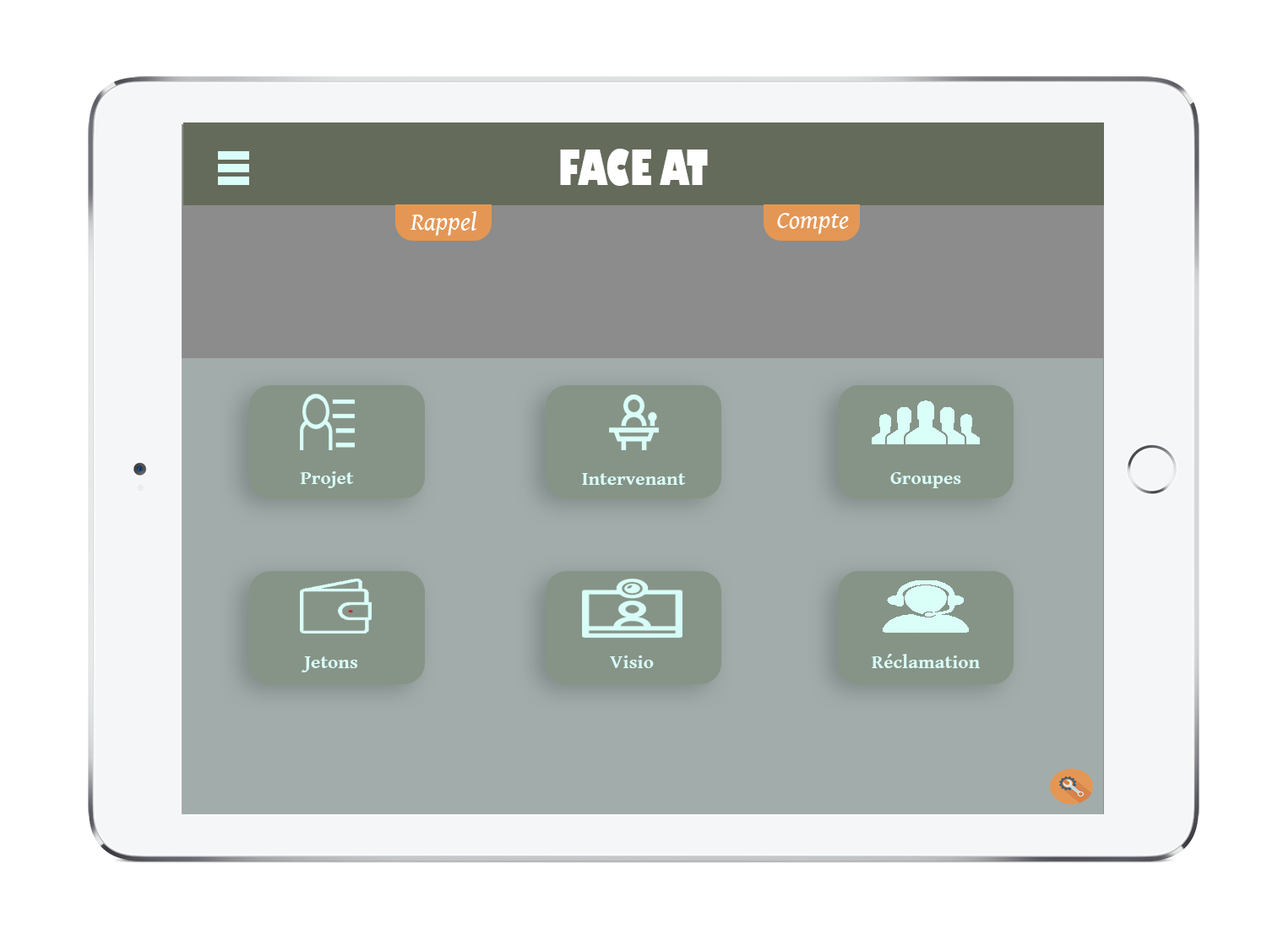
<style>
.page{position:relative;width:1267px;height:941px;background:#ffffff}
.page>*{position:absolute;margin:0}
.t1{font:48.2px "GillSans-UltraBold";color:#ffffff;scale:0.63 1}
.t2{font:25.3px "GentiumBookBasic-Italic";color:#ffffff}
.t3{font:19.4px "GentiumBookBasic-Bold";color:#dafff8}
</style>
<div class="page">
<p class="t1" style="left:560px;top:149px;width:148px;height:37px">FACE AT</p>
<p class="t2" style="left:411px;top:211px;width:65px;height:25px">Rappel</p>
<p class="t2" style="left:777px;top:213px;width:72px;height:21px">Compte</p>
<p class="t3" style="left:300px;top:471px;width:54px;height:17px">Projet</p>
<p class="t3" style="left:582px;top:473px;width:104px;height:12px">Intervenant</p>
<p class="t3" style="left:890px;top:472px;width:71px;height:16px">Groupes</p>
<p class="t3" style="left:872px;top:654px;width:108px;height:14px">Réclamation</p>
<p class="t3" style="left:302px;top:656px;width:56px;height:16px">Jetons</p>
<p class="t3" style="left:610px;top:656px;width:44px;height:12px">Visio</p>
</div>
